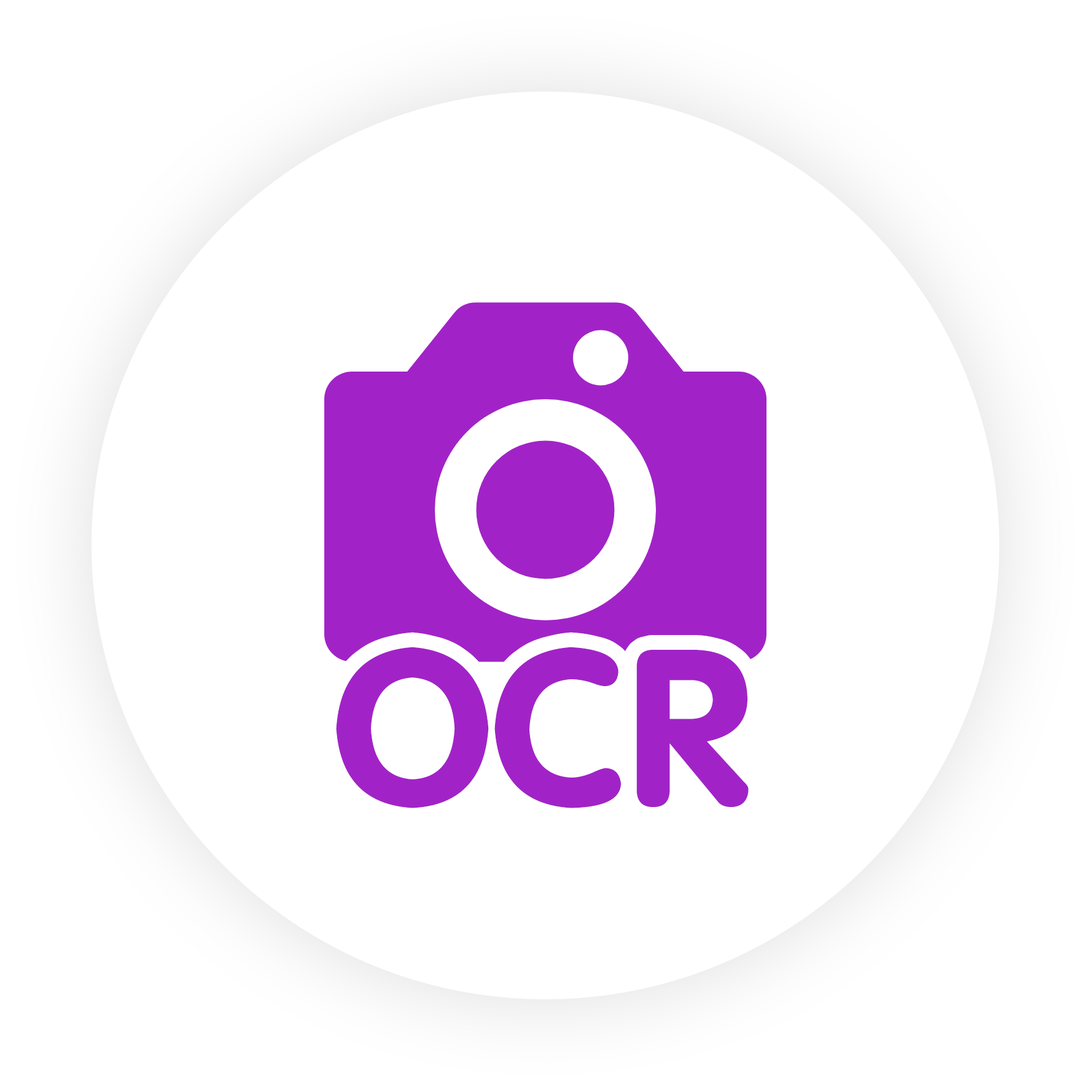
<style>
.page{position:relative;width:1092px;height:1092px;background:#ffffff}
.page>*{position:absolute;margin:0}
.t1{font:221.1px "FZYHJW--GB1-0";color:#a123c7}
</style>
<div class="page">
<p class="t1" style="left:336px;top:647px;width:413px;height:161px">OCR</p>
</div>
